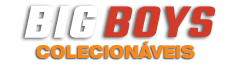
<style>
.page{position:relative;width:238px;height:68px;background:#ffffff}
.page>*{position:absolute;margin:0}
.t1{font:48px "Teko-SemiBold";letter-spacing:0.025em;color:#cf2c1a;font-style:italic;scale:1.2 1}
.t2{font:48px "Teko-SemiBold";color:#ffffff;font-weight:bold;font-style:italic;scale:1.2 1}
.t3{font:18px "HelveticaNeueLTPro-BlkEx";letter-spacing:-0.005em;color:#f58415;scale:0.8 1}
</style>
<div class="page">
<p class="t1" style="left:24px;top:5px;width:192px;height:33px;opacity:0.93"><span class="t2">BIG </span>BOYS</p>
<p class="t3" style="left:36px;top:41px;width:159px;height:18px;opacity:0.95">COLECIONÁVEIS</p>
</div>
